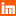
<style>
.page{position:relative;width:16px;height:16px;background:#fa5901}
.page>*{position:absolute;margin:0}
.t1{font:16px "ARDESTINE";color:#ffffff}
</style>
<div class="page">
<p class="t1" style="left:1px;top:2px;width:4px;height:12px">i</p>
<p class="t1" style="left:5px;top:5px;width:10px;height:9px">m</p>
</div>
